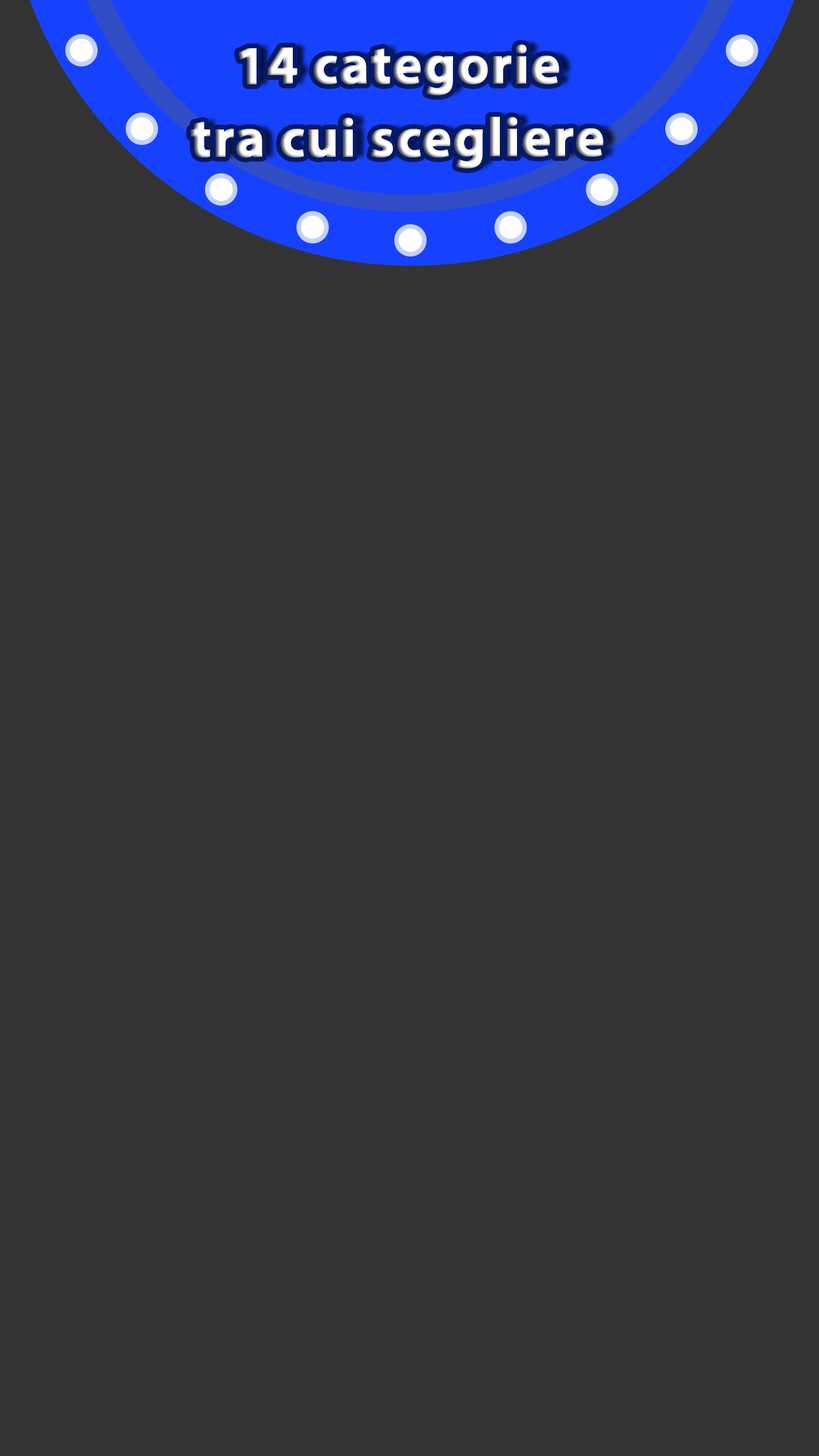
<style>
.page{position:relative;width:819px;height:1456px;background:#333333}
.page>*{position:absolute;margin:0}
.t1{font:54.9px/72.8px "MyriadPro-Bold";letter-spacing:0.01em;color:#fffefe;font-weight:bold}
</style>
<div class="page">
<p class="t1" style="left:191px;top:44px;width:412px;height:125px;text-align:center">14 categorie<br>tra cui scegliere</p>
</div>
